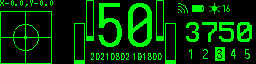
<style>
.page{position:relative;width:256px;height:64px;background:#000000}
.page>*{position:absolute;margin:0}
.t1{font:60px "Sarasa-Mono-SC-Regular";color:#00ff0c}
.t2{font:8px "Sarasa-Mono-SC-Regular";color:#00ff0c}
.t3{font:8px "Sarasa-UI-SC-Regular";color:#00ff0c}
.t4{font:13px "Sarasa-Mono-SC-Regular";color:#00ff0c}
</style>
<div class="page">
<p class="t1" style="left:98px;top:3px;width:54px;height:44px">50</p>
<p class="t2" style="left:222px;top:5px;width:8px;height:7px">16</p>
<p class="t3" style="left:91px;top:53px;width:71px;height:7px">20210802 191800</p>
<p class="t4" style="left:189px;top:49px;width:61px;height:10px">1 2 3 4 5</p>
</div>
